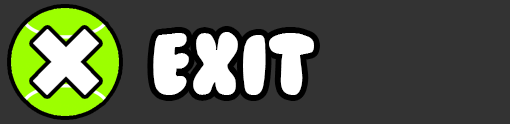
<style>
.page{position:relative;width:510px;height:124px;background:#333333}
.page>*{position:absolute;margin:0}
.t1{font:80px "BubbleGum";color:#ffffff}
</style>
<div class="page">
<p class="t1" style="left:153px;top:32px;width:161px;height:63px">Exit</p>
</div>
